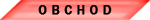
<style>
.page{position:relative;width:150px;height:20px}
.page>*{position:absolute;margin:0}
.t1{font:13px "FranklinGothic-Medium";letter-spacing:0.34em;color:#000000;text-transform:uppercase;font-weight:bold}
</style>
<div class="page">
<p class="t1" style="left:38px;top:5px;width:74px;height:10px">obchod</p>
</div>
